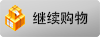
<style>
.page{position:relative;width:100px;height:37px}
.page>*{position:absolute;margin:0}
.t1{font:14px "SimHei";color:#000000}
</style>
<div class="page">
<p class="t1" style="left:32px;top:11px;width:56px;height:14px">继续购物</p>
</div>
